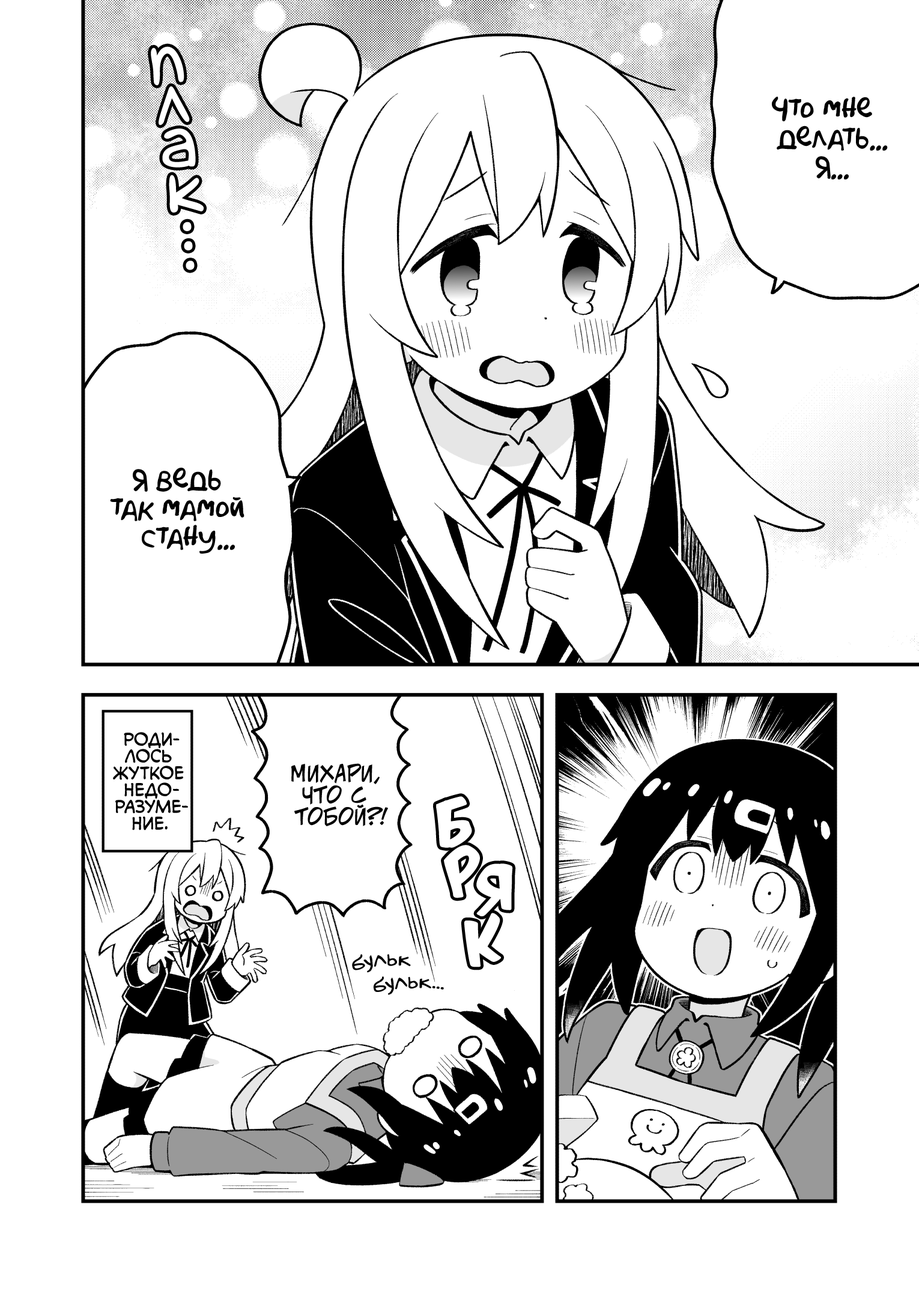
<style>
.page{position:relative;width:919px;height:1297px;background:#ffffff}
.page>*{position:absolute;margin:0}
.t1{font:72.1px "laCartoonerie";color:#ffffff}
.t2{font:28.8px "AkbarPlain";color:#000000}
.t3{font:16.8px "v_CCMonologous";color:#000000;text-transform:uppercase}
.t4{font:21.6px "v_CCJeffCampbell";color:#000000;text-transform:uppercase}
.t5{font:54.1px "KomikaTitle-AxisRUS-LAT";color:#ffffff}
.t6{font:21.6px "v_Augie";color:#000000}
</style>
<div class="page">
<p class="t1" style="left:151px;top:46px;width:33px;height:39px;rotate:-4deg">п</p>
<p class="t1" style="left:159px;top:86px;width:31px;height:40px;rotate:-4deg">л</p>
<p class="t2" style="left:772px;top:97px;width:116px;height:83px;text-align:center">Что мне<br>делать...<br>Я...</p>
<p class="t1" style="left:162px;top:129px;width:34px;height:39px;rotate:-3deg">а</p>
<p class="t1" style="left:169px;top:175px;width:35px;height:38px;rotate:-2deg">к</p>
<p class="t1" style="left:183px;top:222px;width:9px;height:9px">.</p>
<p class="t1" style="left:184px;top:241px;width:9px;height:9px">.</p>
<p class="t1" style="left:186px;top:261px;width:9px;height:9px">.</p>
<p class="t2" style="left:110px;top:467px;width:134px;height:87px;text-align:center">Я ведь<br>так мамой<br>стану...</p>
<p class="t3" style="left:113px;top:732px;width:75px;height:99px;text-align:center">Роди-<br>лось<br>жуткое<br>недо-<br>разуме-<br>ние.</p>
<p class="t4" style="left:291px;top:763px;width:97px;height:64px;text-align:center">Михари,<br>что с<br>тобой?!</p>
<p class="t5" style="left:435px;top:797px;width:37px;height:51px;rotate:-12deg">б</p>
<p class="t5" style="left:444px;top:845px;width:36px;height:54px;rotate:-22deg">р</p>
<p class="t5" style="left:476px;top:864px;width:37px;height:53px;rotate:-12deg">я</p>
<p class="t5" style="left:464px;top:913px;width:38px;height:55px;rotate:-16deg">к</p>
<p class="t6" style="left:352px;top:954px;width:59px;height:19px;rotate:-6deg">бульк</p>
<p class="t6" style="left:373px;top:977px;width:71px;height:18px;rotate:-3deg">бульк...</p>
</div>
